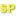
<style>
.page{position:relative;width:16px;height:16px;background:#ffffff}
.page>*{position:absolute;margin:0}
.t1{font:10.7px "Arial-BoldMT";letter-spacing:0.05em;color:#ffff00}
</style>
<div class="page">
<p class="t1" style="left:0px;top:4px;width:7px;height:8px">S</p>
<p class="t1" style="left:8px;top:4px;width:7px;height:8px">P</p>
</div>
